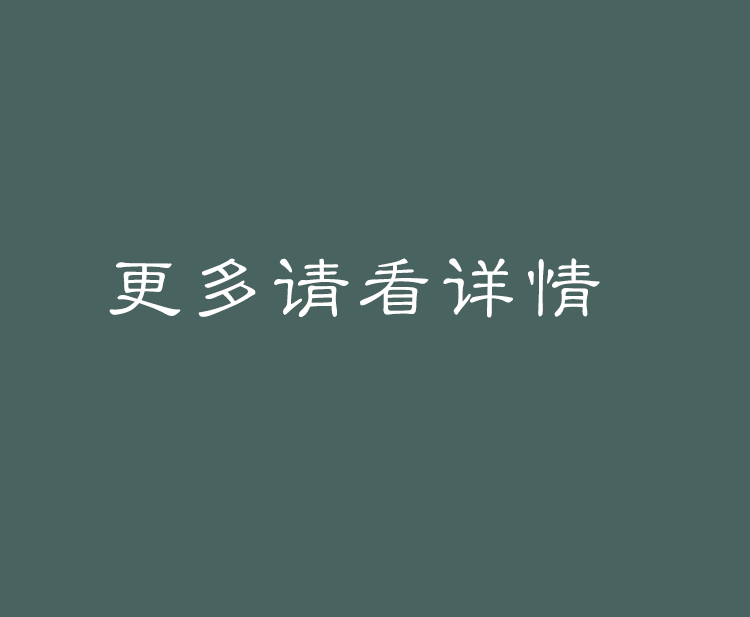
<style>
.page{position:relative;width:750px;height:617px;background:#496360}
.page>*{position:absolute;margin:0}
.t1{font:84px "STLibianTC-Regular";color:#ffffff}
</style>
<div class="page">
<p class="t1" style="left:109px;top:258px;width:491px;height:60px">更多请看详情</p>
</div>
